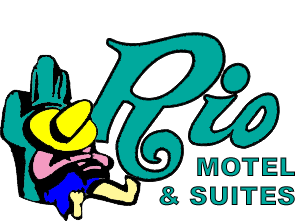
<style>
.page{position:relative;width:302px;height:221px;background:#ffffff}
.page>*{position:absolute;margin:0}
.t1{font:26px/24px "Arial-Black"}
</style>
<div class="page">
<p class="t1" style="left:159px;top:157px;width:136px;height:49px;text-align:right">MOTEL<br>&amp; SUITES</p>
</div>
